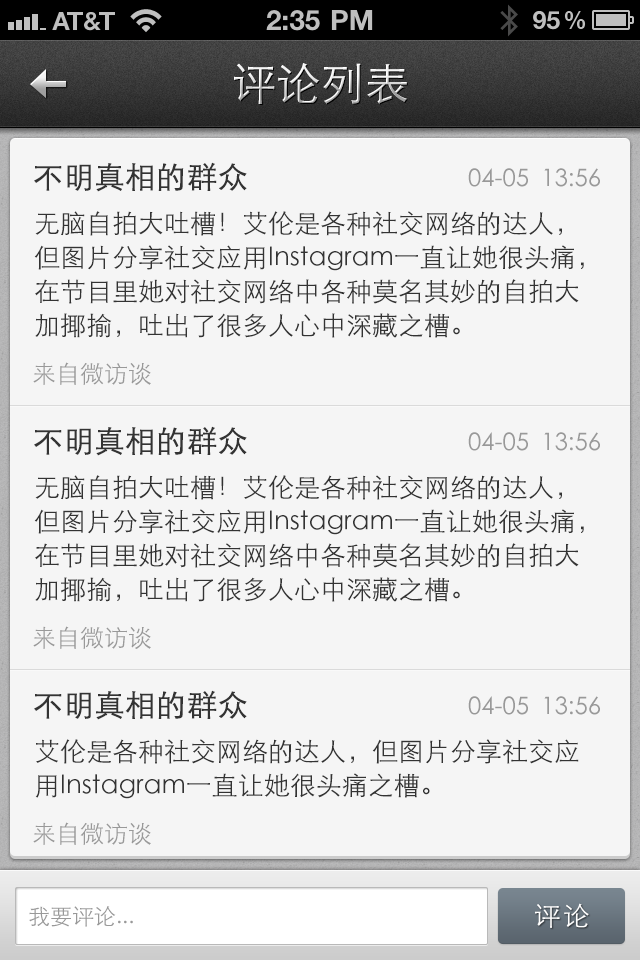
<style>
.page{position:relative;width:640px;height:960px;background:#f5f5f5}
.page>*{position:absolute;margin:0}
.t1{font:44px "STXihei";letter-spacing:0.005em}
.t2{font:30px "STXihei";color:#333333;font-weight:bold}
.t3{font:24px "STXihei";color:#999999}
.t4{font:26px/34px "STXihei";color:#333333}
.t5{font:26px "STXihei";letter-spacing:0.1em;color:#ffffff}
.t6{font:22px "STXihei";color:#999999}
</style>
<div class="page">
<p class="t1" style="left:234px;top:63px;width:173px;height:41px">评论列表</p>
<p class="t2" style="left:34px;top:162px;width:213px;height:30px">不明真相的群众</p>
<p class="t3" style="left:468px;top:168px;width:132px;height:19px">04-05  13:56</p>
<p class="t4" style="left:34px;top:211px;width:550px;height:127px">无脑自拍大吐槽！艾伦是各种社交网络的达人，但图片分享社交应用Instagram一直让她很头痛，在节目里她对社交网络中各种莫名其妙的自拍大加揶揄，吐出了很多人心中深藏之槽。</p>
<p class="t3" style="left:33px;top:362px;width:118px;height:23px">来自微访谈</p>
<p class="t2" style="left:34px;top:426px;width:213px;height:30px">不明真相的群众</p>
<p class="t3" style="left:468px;top:432px;width:132px;height:19px">04-05  13:56</p>
<p class="t4" style="left:34px;top:475px;width:550px;height:127px">无脑自拍大吐槽！艾伦是各种社交网络的达人，但图片分享社交应用Instagram一直让她很头痛，在节目里她对社交网络中各种莫名其妙的自拍大加揶揄，吐出了很多人心中深藏之槽。</p>
<p class="t3" style="left:33px;top:626px;width:118px;height:23px">来自微访谈</p>
<p class="t2" style="left:34px;top:690px;width:213px;height:30px">不明真相的群众</p>
<p class="t3" style="left:468px;top:696px;width:132px;height:19px">04-05  13:56</p>
<p class="t4" style="left:35px;top:739px;width:544px;height:60px">艾伦是各种社交网络的达人，但图片分享社交应用Instagram一直让她很头痛之槽。</p>
<p class="t3" style="left:33px;top:822px;width:118px;height:23px">来自微访谈</p>
<p class="t5" style="left:535px;top:903px;width:54px;height:25px">评论</p>
<p class="t6" style="left:29px;top:906px;width:104px;height:21px">我要评论...</p>
</div>
